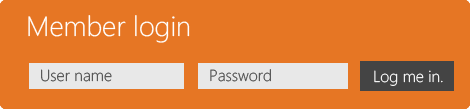
<style>
.page{position:relative;width:470px;height:109px;background:#e67624}
.page>*{position:absolute;margin:0}
.t1{font:28px "SegoeWP-Light";color:#ffffff}
.t2{font:16px "SegoeWPN-Light";color:#4f4f4f}
.t3{font:16px "SegoeWPN-Light";color:#ffffff}
</style>
<div class="page">
<p class="t1" style="left:28px;top:15px;width:162px;height:28px">Member login</p>
<p class="t2" style="left:41px;top:69px;width:71px;height:13px">User name</p>
<p class="t2" style="left:210px;top:69px;width:61px;height:13px">Password</p>
<p class="t3" style="left:374px;top:70px;width:69px;height:16px">Log me in.</p>
</div>
